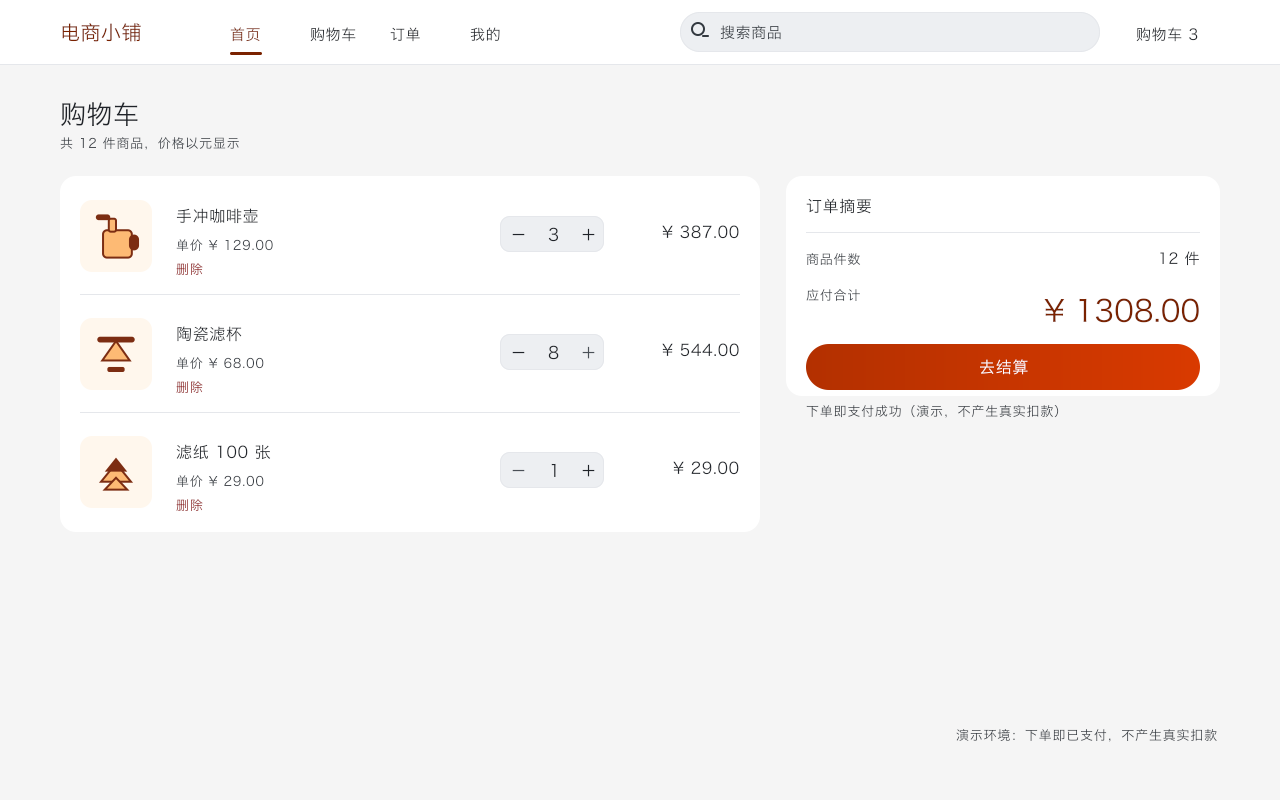
<style>
.page{position:relative;width:1280px;height:800px;background:#f5f5f5}
.page>*{position:absolute;margin:0}
.t1{font:20px "HiraginoSansGB-Regular";letter-spacing:0.024em;color:#7a2200}
.t2{font:15px "HiraginoSansGB-Regular";letter-spacing:0.04em;color:#853d26}
.t3{font:15px "HiraginoSansGB-Regular";letter-spacing:0.04em;color:#262a2f}
.t4{font:15px "HiraginoSansGB-Regular";letter-spacing:0.04em;color:#282c31}
.t5{font:15px "HiraginoSansGB-Regular";letter-spacing:0.04em;color:#2a2d33}
.t6{font:15px "HiraginoSansGB-Regular";letter-spacing:0.04em;color:#333940}
.t7{font:15px "HiraginoSansGB-Regular";letter-spacing:0.04em;color:#23262c}
.t8{font:26px "HiraginoSansGB-Regular";letter-spacing:0.02em;color:#1f2329}
.t9{font:13px "HiraginoSansGB-Regular";letter-spacing:0.06em;color:#333940}
.t10{font:16px "HiraginoSansGB-Regular";letter-spacing:0.04em;color:#1f2329}
.t11{font:16px "HiraginoSansGB-Regular";letter-spacing:0.04em;color:#272b30}
.t12{font:17px "HiraginoSansGB-Regular";letter-spacing:0.03em;color:#1f2329}
.t13{font:13px "HiraginoSansGB-Regular";letter-spacing:0.06em;color:#42474d}
.t14{font:13px "HiraginoSansGB-Regular";letter-spacing:0.06em}
.t15{font:15px "HiraginoSansGB-Regular";letter-spacing:0.04em;color:#22262b}
.t16{font:13px "HiraginoSansGB-Regular";letter-spacing:0.06em;color:#3d4248}
.t17{font:30px "HiraginoSansGB-Regular";color:#7a2200}
.t18{font:16px "HiraginoSansGB-Regular";letter-spacing:0.04em;color:#25292e}
.t19{font:17px "HiraginoSansGB-Regular";letter-spacing:0.03em;color:#4a5057}
.t20{font:13px "HiraginoSansGB-Regular";letter-spacing:0.06em;color:#3b4147}
.t21{font:16px "HiraginoSansGB-Regular";letter-spacing:0.04em;color:#ffffff}
.t22{font:13px "HiraginoSansGB-Regular";letter-spacing:0.06em;color:#464b50}
.t23{font:16px "HiraginoSansGB-Regular";letter-spacing:0.04em;color:#25282e}
.t24{font:13px "HiraginoSansGB-Regular";letter-spacing:0.06em;color:#3f454b}
.t25{font:13px "HiraginoSansGB-Regular";letter-spacing:0.06em;color:#40454b}
</style>
<div class="page">
<p class="t1" style="left:61px;top:23px;width:81px;height:20px">电商小铺</p>
<p class="t2" style="left:229px;top:27px;width:32px;height:16px">首页</p>
<p class="t3" style="left:309px;top:27px;width:48px;height:16px">购物车</p>
<p class="t4" style="left:389px;top:27px;width:32px;height:16px">订单</p>
<p class="t5" style="left:469px;top:27px;width:32px;height:15px">我的</p>
<p class="t6" style="left:719px;top:25px;width:63px;height:16px">搜索商品</p>
<p class="t7" style="left:1135px;top:27px;width:64px;height:16px">购物车 3</p>
<p class="t8" style="left:59px;top:102px;width:80px;height:26px">购物车</p>
<p class="t9" style="left:59px;top:137px;width:181px;height:14px">共 12 件商品，价格以元显示</p>
<p class="t10" style="left:805px;top:198px;width:67px;height:17px">订单摘要</p>
<p class="t11" style="left:175px;top:208px;width:84px;height:17px">手冲咖啡壶</p>
<p class="t12" style="left:512px;top:233px;width:13px;height:3px">－</p>
<p class="t12" style="left:547px;top:227px;width:13px;height:16px">3</p>
<p class="t12" style="left:582px;top:228px;width:13px;height:13px">＋</p>
<p class="t10" style="left:661px;top:225px;width:79px;height:15px">¥ 387.00</p>
<p class="t13" style="left:175px;top:239px;width:99px;height:13px">单价 ¥ 129.00</p>
<p class="t14" style="left:805px;top:253px;width:57px;height:13px">商品件数</p>
<p class="t15" style="left:1159px;top:251px;width:41px;height:16px">12 件</p>
<p class="t14" style="left:175px;top:263px;width:29px;height:13px">删除</p>
<p class="t16" style="left:805px;top:288px;width:56px;height:14px">应付合计</p>
<p class="t17" style="left:1043px;top:298px;width:157px;height:26px">¥ 1308.00</p>
<p class="t18" style="left:176px;top:326px;width:67px;height:17px">陶瓷滤杯</p>
<p class="t12" style="left:512px;top:351px;width:13px;height:3px">－</p>
<p class="t12" style="left:547px;top:345px;width:13px;height:16px">8</p>
<p class="t19" style="left:582px;top:346px;width:13px;height:13px">＋</p>
<p class="t10" style="left:661px;top:343px;width:79px;height:15px">¥ 544.00</p>
<p class="t20" style="left:175px;top:357px;width:90px;height:13px">单价 ¥ 68.00</p>
<p class="t21" style="left:979px;top:359px;width:50px;height:17px">去结算</p>
<p class="t14" style="left:175px;top:381px;width:29px;height:13px">删除</p>
<p class="t22" style="left:805px;top:404px;width:255px;height:15px">下单即支付成功（演示，不产生真实扣款）</p>
<p class="t23" style="left:175px;top:444px;width:97px;height:17px">滤纸 100 张</p>
<p class="t10" style="left:672px;top:461px;width:68px;height:15px">¥ 29.00</p>
<p class="t19" style="left:512px;top:469px;width:13px;height:3px">－</p>
<p class="t12" style="left:550px;top:463px;width:7px;height:15px">1</p>
<p class="t12" style="left:582px;top:464px;width:13px;height:13px">＋</p>
<p class="t24" style="left:175px;top:475px;width:90px;height:13px">单价 ¥ 29.00</p>
<p class="t14" style="left:175px;top:499px;width:29px;height:13px">删除</p>
<p class="t25" style="left:955px;top:728px;width:263px;height:15px">演示环境：下单即已支付，不产生真实扣款</p>
</div>
